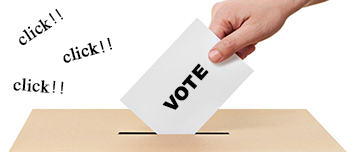
<style>
.page{position:relative;width:356px;height:152px;background:#ffffff}
.page>*{position:absolute;margin:0}
.t1{font:18px "Rekha";color:#020202;font-weight:bold}
.t2{font:18px "Arial-Black";color:#020202;font-weight:bold}
</style>
<div class="page">
<p class="t1" style="left:19px;top:9px;width:44px;height:37px;rotate:-34deg">click!!</p>
<p class="t1" style="left:63px;top:37px;width:50px;height:26px;rotate:-16deg">click!!</p>
<p class="t2" style="left:162px;top:63px;width:47px;height:47px;rotate:-49deg">VOTE</p>
<p class="t1" style="left:13px;top:78px;width:51px;height:16px;rotate:4deg">click!!</p>
</div>
